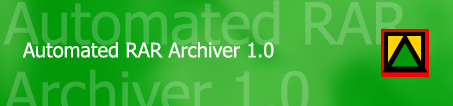
<style>
.page{position:relative;width:453px;height:106px}
.page>*{position:absolute;margin:0}
.t1{font:20px "Tahoma";color:#ffffff}
</style>
<div class="page">
<p class="t1" style="left:22px;top:42px;width:252px;height:16px">Automated RAR Archiver 1.0</p>
</div>
